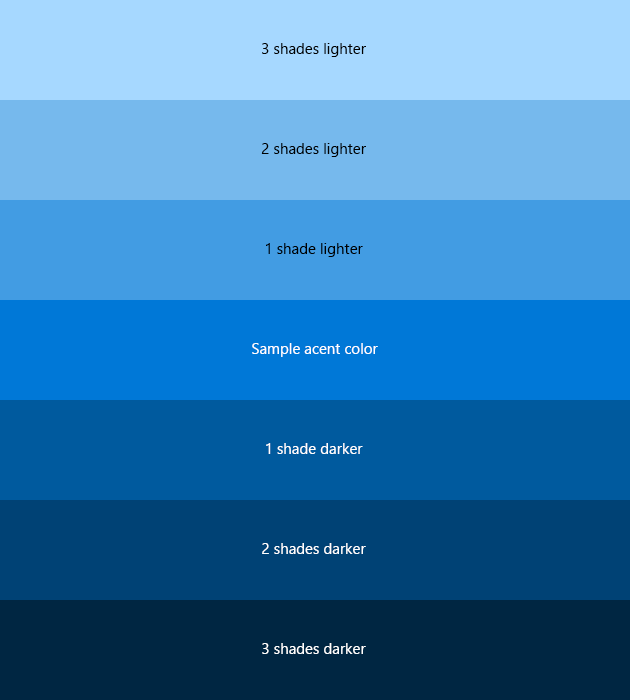
<style>
.page{position:relative;width:630px;height:700px}
.page>*{position:absolute;margin:0}
.t1{font:15px "SegoeUI";color:#010101}
.t2{font:15px "SegoeUI";color:#000000}
.t3{font:15px "SegoeUI";color:#ffffff}
</style>
<div class="page">
<p class="t1" style="left:262px;top:43px;width:104px;height:14px">3 shades lighter</p>
<p class="t2" style="left:261px;top:143px;width:105px;height:14px">2 shades lighter</p>
<p class="t2" style="left:266px;top:243px;width:97px;height:14px">1 shade lighter</p>
<p class="t3" style="left:252px;top:343px;width:126px;height:14px">Sample acent color</p>
<p class="t3" style="left:266px;top:443px;width:97px;height:11px">1 shade darker</p>
<p class="t3" style="left:262px;top:543px;width:104px;height:11px">2 shades darker</p>
<p class="t3" style="left:262px;top:643px;width:104px;height:11px">3 shades darker</p>
</div>
